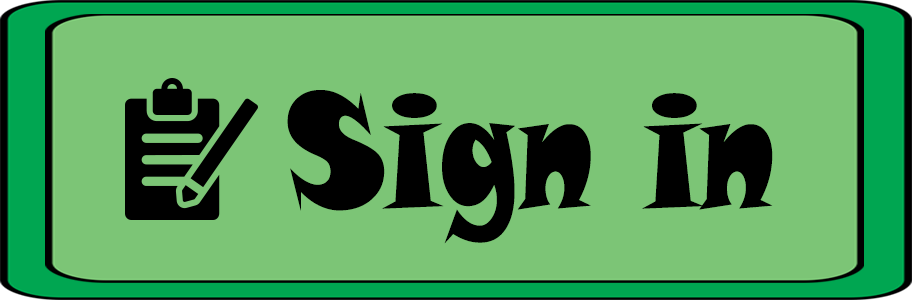
<style>
.page{position:relative;width:912px;height:300px;background:#7cc576}
.page>*{position:absolute;margin:0}
.t1{font:160px "SnapITC-Regular";color:#000000;scale:0.75 1}
</style>
<div class="page">
<p class="t1" style="left:287px;top:90px;width:486px;height:154px">Sign in</p>
</div>
